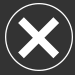
<style>
.page{position:relative;width:75px;height:75px;background:#333333}
.page>*{position:absolute;margin:0}
.t1{font:97.5px "Helvetica";letter-spacing:-0.01em;color:#ffffff}
</style>
<div class="page">
<p class="t1" style="left:18px;top:17px;width:41px;height:42px;rotate:45deg">+</p>
</div>
